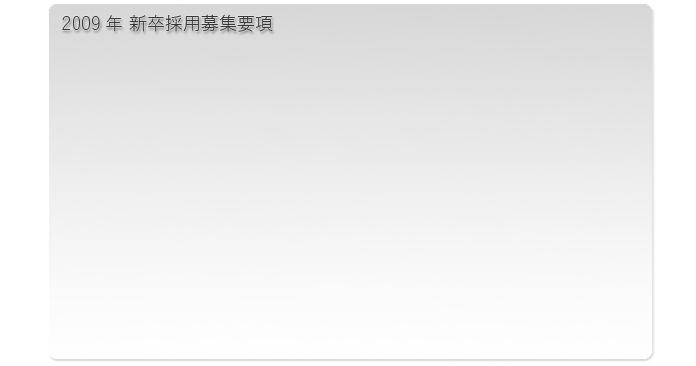
<style>
.page{position:relative;width:696px;height:366px}
.page>*{position:absolute;margin:0}
.t1{font:18px "YuGothicStd-L";color:#363636}
</style>
<div class="page">
<p class="t1" style="left:62px;top:14px;width:211px;height:18px">2009年 新卒採用募集要項</p>
</div>
